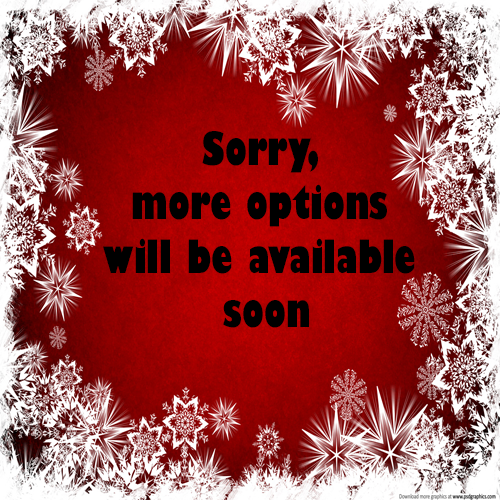
<style>
.page{position:relative;width:500px;height:500px}
.page>*{position:absolute;margin:0}
.t1{font:45px "GillSans-UltraBoldCondensed";color:#000000}
</style>
<div class="page">
<p class="t1" style="left:103px;top:131px;width:312px;height:197px;text-align:center">Sorry, <br>more options <br>will be available <br>soon</p>
</div>
